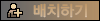
<style>
.page{position:relative;width:100px;height:21px}
.page>*{position:absolute;margin:0}
.t1{font:15px "YDIYGO330";color:#cba97f}
</style>
<div class="page">
<p class="t1" style="left:33px;top:3px;width:54px;height:15px">배치하기</p>
</div>
